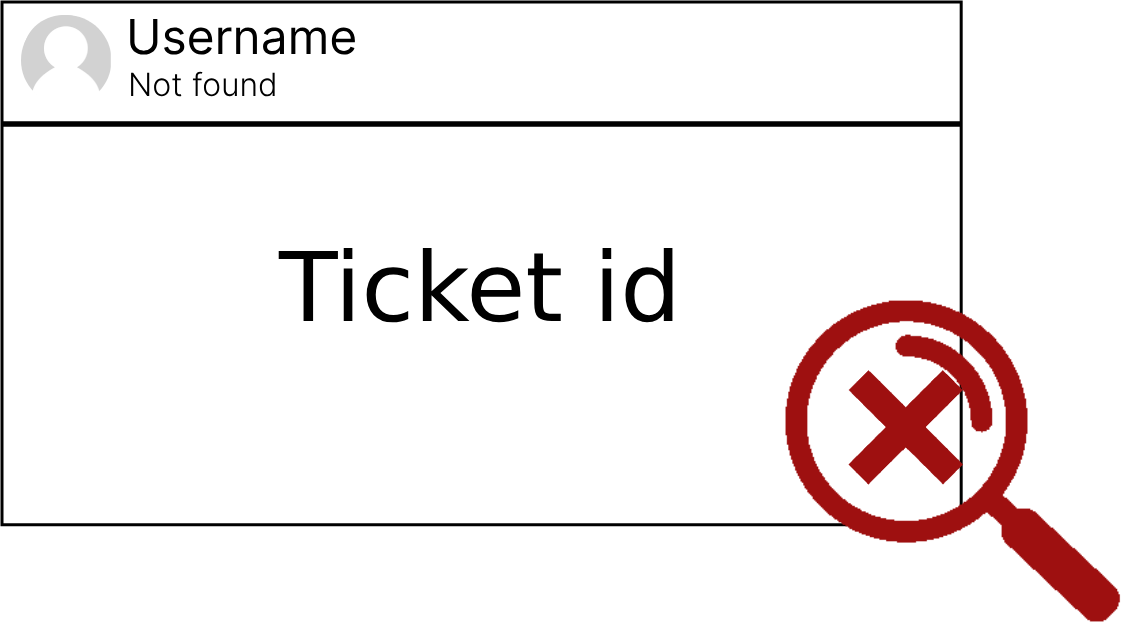
<style>
.page{position:relative;width:1122px;height:623px;background:#ffffff}
.page>*{position:absolute;margin:0}
.t1{font:48px "Inter-Regular";color:#000000}
.t2{font:32px "Inter-Light";color:#000000}
.t3{font:96px "DejaVuSans";color:#000000}
</style>
<div class="page">
<p class="t1" style="left:130px;top:19px;width:225px;height:36px">Username</p>
<p class="t2" style="left:131px;top:71px;width:144px;height:26px">Not found</p>
<p class="t3" style="left:278px;top:248px;width:395px;height:75px">Ticket id found</p>
</div>
